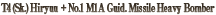
<style>
.page{position:relative;width:216px;height:15px;background:#ffffff}
.page>*{position:absolute;margin:0}
.t1{font:11px "RyuminPro-ExBold";letter-spacing:-0.095em;color:#4a3f32;font-weight:bold;scale:0.8 1}
</style>
<div class="page">
<p class="t1" style="left:0px;top:3px;width:215px;height:12px">T4 (Sk.) Hiryuu + No.1 M1A Guid. Missile Heavy Bomber</p>
</div>
